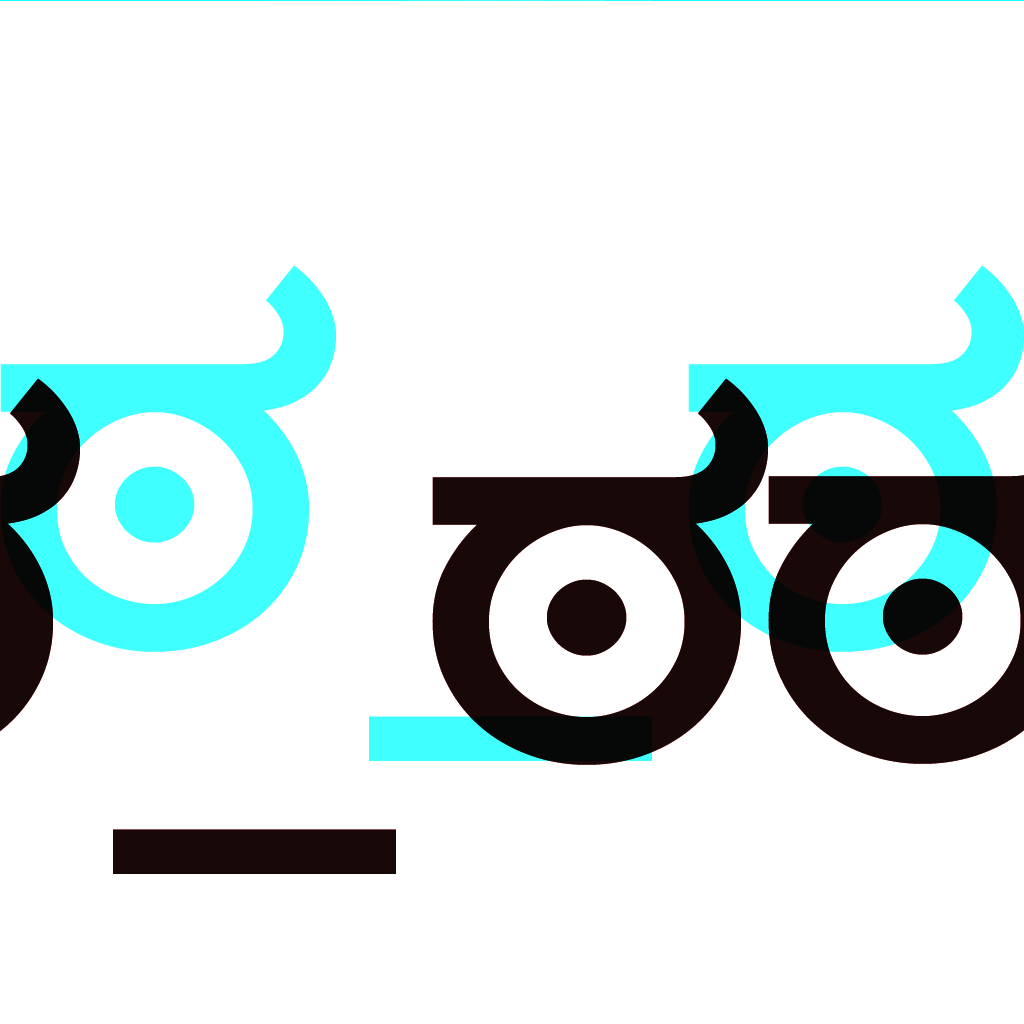
<style>
.page{position:relative;width:1024px;height:1024px;background:#ffffff}
.page>*{position:absolute;margin:0}
.t1{font:531.6px "KannadaSangamMN-Bold"}
</style>
<div class="page">
<p class="t1" style="left:0px;top:264px;width:1024px;height:496px">ಠ_ಠ</p>
</div>
